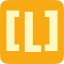
<style>
.page{position:relative;width:64px;height:64px;background:#f7aa14}
.page>*{position:absolute;margin:0}
.t1{font:47px "Anton-Regular";color:#fcf8c0}
</style>
<div class="page">
<p class="t1" style="left:6px;top:10px;width:14px;height:41px">[</p>
<p class="t1" style="left:24px;top:11px;width:18px;height:41px">L</p>
<p class="t1" style="left:44px;top:10px;width:14px;height:41px">]</p>
</div>
